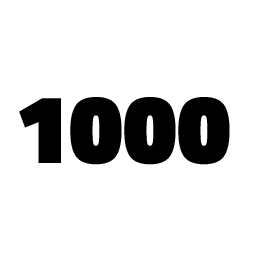
<style>
.page{position:relative;width:256px;height:256px;background:#ffffff}
.page>*{position:absolute;margin:0}
.t1{font:98.3px "TitilliumWeb-Black";color:#000000}
</style>
<div class="page">
<p class="t1" style="left:19px;top:97px;width:211px;height:68px">1000</p>
</div>
